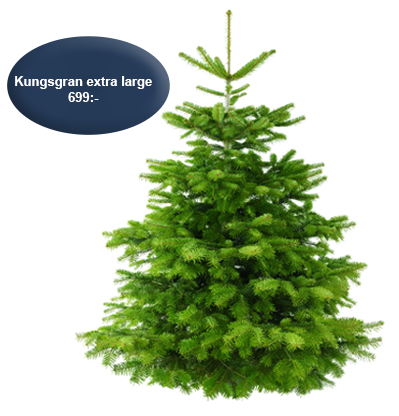
<style>
.page{position:relative;width:399px;height:416px;background:#ffffff}
.page>*{position:absolute;margin:0}
.t1{font:13px "Arial-BoldMT";color:#ffffff}
</style>
<div class="page">
<p class="t1" style="left:15px;top:76px;width:137px;height:26px;text-align:center">Kungsgran extra large <br>699:-</p>
</div>
